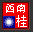
<style>
.page{position:relative;width:33px;height:32px;background:#f20000}
.page>*{position:absolute;margin:0}
.t1{font:10.4px "SimSun";color:#ffffff}
.t2{font:11.7px "SimSun";color:#ffffff}
</style>
<div class="page">
<p class="t1" style="left:6px;top:4px;width:19px;height:9px">西南</p>
<p class="t2" style="left:16px;top:15px;width:11px;height:12px">桂</p>
</div>
